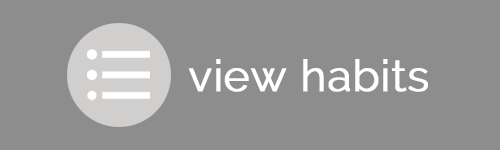
<style>
.page{position:relative;width:500px;height:150px;background:#8d8d8d}
.page>*{position:absolute;margin:0}
.t1{font:44px "Raleway";color:#ffffff;font-weight:bold}
</style>
<div class="page">
<p class="t1" style="left:188px;top:59px;width:240px;height:33px">view habits</p>
</div>
